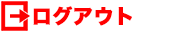
<style>
.page{position:relative;width:180px;height:32px;background:#ffffff}
.page>*{position:absolute;margin:0}
.t1{font:20px "HiraKakuStdN-W8";color:#ff0000;font-weight:bold}
</style>
<div class="page">
<p class="t1" style="left:33px;top:6px;width:99px;height:20px">ログアウト</p>
</div>
